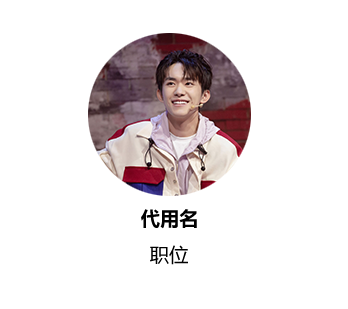
<style>
.page{position:relative;width:348px;height:309px;background:#ffffff}
.page>*{position:absolute;margin:0}
.t1{font:19.2px "MicrosoftYaHei-Bold";color:#010101;text-transform:uppercase}
.t2{font:19.2px "MicrosoftYaHei";color:#010101;text-transform:uppercase}
</style>
<div class="page">
<p class="t1" style="left:141px;top:209px;width:56px;height:20px">代用名</p>
<p class="t2" style="left:150px;top:245px;width:38px;height:20px">职位</p>
</div>
